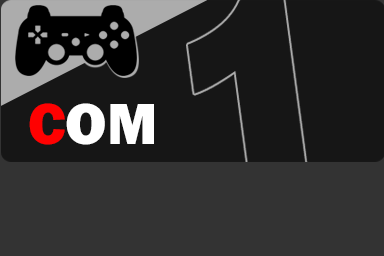
<style>
.page{position:relative;width:384px;height:256px;background:#161616}
.page>*{position:absolute;margin:0}
.t1{font:60px "FranklinGothic-Heavy";color:#ffffff}
.t2{font:60px "FranklinGothic-Heavy";color:#ff0101}
</style>
<div class="page">
<p class="t1" style="left:29px;top:103px;width:125px;height:42px"><span class="t2">C</span>OM</p>
</div>
